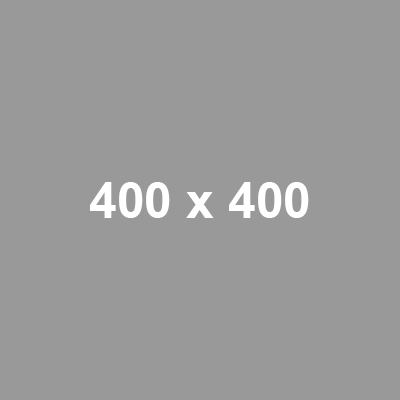
<style>
.page{position:relative;width:400px;height:400px;background:#999999}
.page>*{position:absolute;margin:0}
.t1{font:50px "Arial-BoldMT";color:#ffffff}
</style>
<div class="page">
<p class="t1" style="left:90px;top:182px;width:219px;height:36px">400 x 400</p>
</div>
